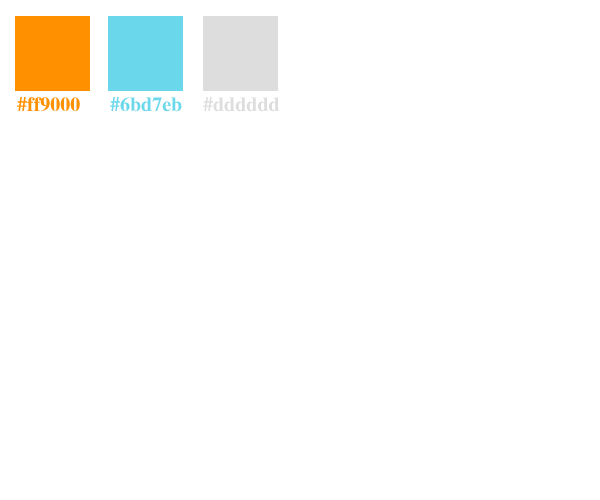
<style>
.page{position:relative;width:600px;height:500px;background:#ffffff}
.page>*{position:absolute;margin:0}
.t1{font:20px "FZXBSJW--GB1-0";color:#ff9000}
.t2{font:20px "FZXBSJW--GB1-0";color:#6bd7eb}
.t3{font:20px "FZXBSJW--GB1-0";color:#dddddd}
</style>
<div class="page">
<p class="t1" style="left:17px;top:97px;width:63px;height:14px">#ff9000</p>
<p class="t2" style="left:110px;top:97px;width:72px;height:15px">#6bd7eb</p>
<p class="t3" style="left:203px;top:97px;width:77px;height:15px">#dddddd</p>
</div>
